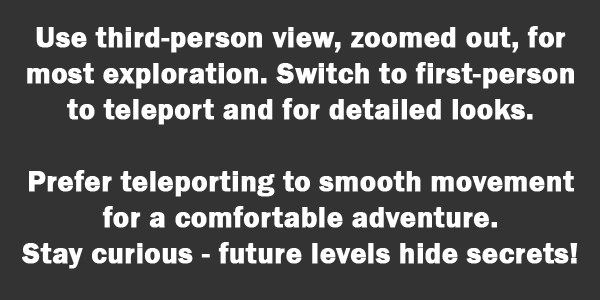
<style>
.page{position:relative;width:600px;height:300px;background:#333333}
.page>*{position:absolute;margin:0}
.t1{font:30px "FranklinGothic-Demi";color:#ffffff;font-weight:bold}
</style>
<div class="page">
<p class="t1" style="left:22px;top:26px;width:556px;height:243px;text-align:center">Use third-person view, zoomed out, for most exploration. Switch to first-person to teleport and for detailed looks. <br><br>Prefer teleporting to smooth movement for a comfortable adventure. <br>Stay curious - future levels hide secrets!</p>
</div>
